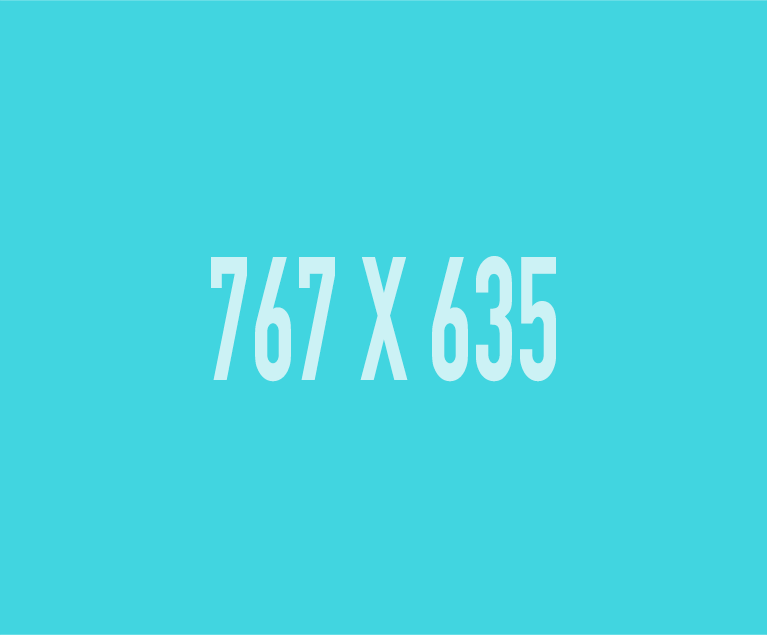
<style>
.page{position:relative;width:767px;height:635px;background:#41d5e0}
.page>*{position:absolute;margin:0}
.t1{font:172.5px "DINCondensed-Bold";color:#ccf2f5;text-transform:uppercase;scale:0.69 1}
</style>
<div class="page">
<p class="t1" style="left:211px;top:256px;width:345px;height:126px">767 x 635</p>
</div>
